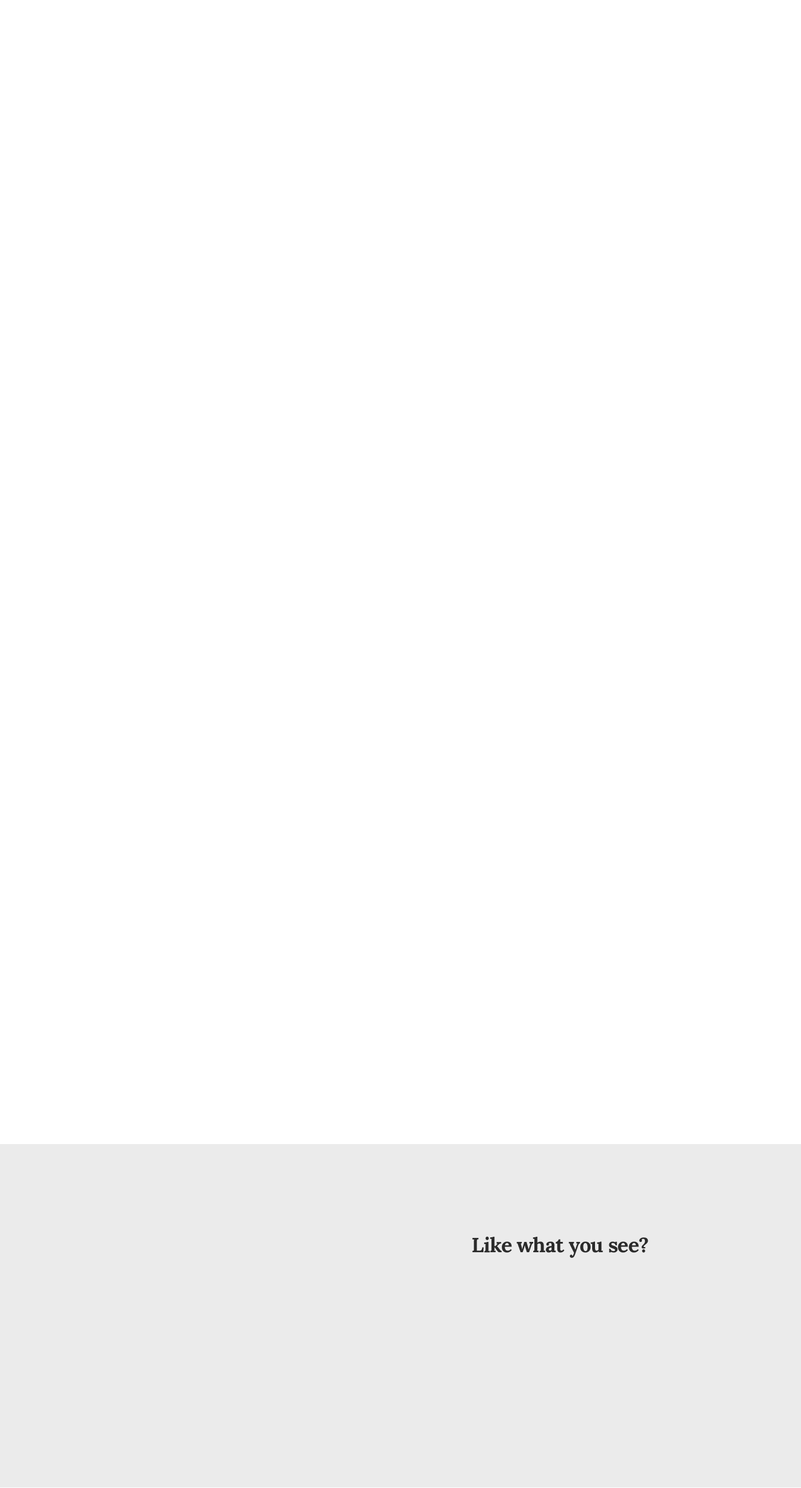
<style>
.page{position:relative;width:801px;height:1488px;background:#ffffff}
.page>*{position:absolute;margin:0}
.t1{font:20.6px "Lora-Bold";letter-spacing:-0.02em;color:#2b2b2b}
</style>
<div class="page">
<p class="t1" style="left:472px;top:1236px;width:176px;height:22px">Like what you see?</p>
</div>
